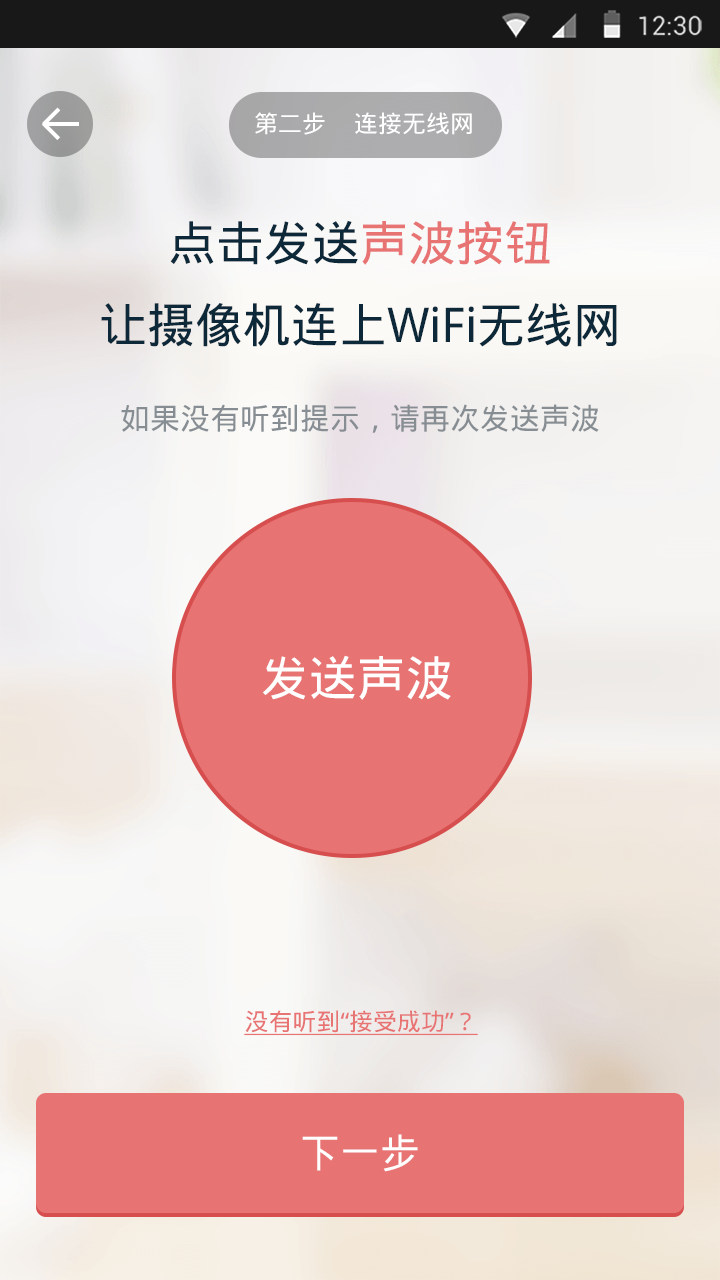
<style>
.page{position:relative;width:720px;height:1280px}
.page>*{position:absolute;margin:0}
.t1{font:24px "DroidSansFallback";color:#ffffff}
.t2{font:48px "DroidSansFallback";color:#0c2839}
.t3{font:48px "DroidSansFallback";color:#e87373}
.t4{font:30px "DroidSansFallback";color:#878e93}
.t5{font:48px "DroidSansFallback";color:#ffffff}
.t6{font:24px "DroidSansFallback";color:#e87373;text-decoration:underline}
.t7{font:40px "DroidSansFallback";color:#ffffff}
</style>
<div class="page">
<p class="t1" style="left:255px;top:112px;width:70px;height:23px">第二步</p>
<p class="t1" style="left:355px;top:112px;width:117px;height:23px">连接无线网</p>
<p class="t2" style="left:170px;top:220px;width:380px;height:45px">点击发送<span class="t3">声波按钮</span></p>
<p class="t2" style="left:101px;top:303px;width:516px;height:44px">让摄像机连上WiFi无线网</p>
<p class="t4" style="left:121px;top:404px;width:478px;height:29px">如果没有听到提示，请再次发送声波</p>
<p class="t5" style="left:262px;top:655px;width:189px;height:45px">发送声波</p>
<p class="t6" style="left:244px;top:1010px;width:234px;height:26px">没有听到“接受成功”？</p>
<p class="t7" style="left:302px;top:1134px;width:116px;height:38px">下一步</p>
</div>
